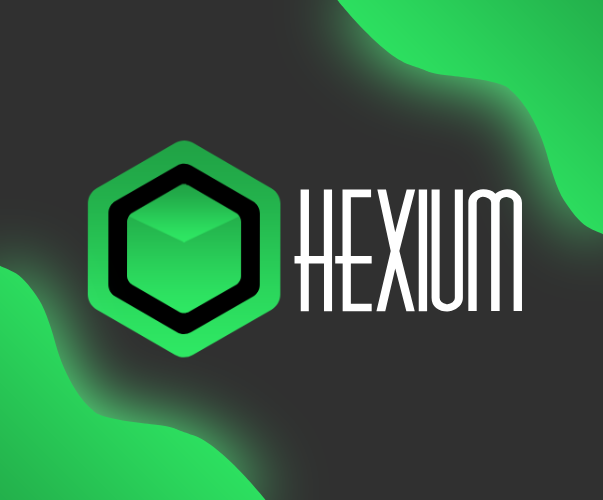
<style>
.page{position:relative;width:603px;height:500px;background:#303030}
.page>*{position:absolute;margin:0}
.t1{font:151.9px "Diner-Fatt";color:#ffffff}
</style>
<div class="page">
<p class="t1" style="left:294px;top:189px;width:228px;height:123px">Hexium</p>
</div>
